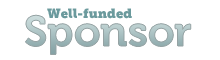
<style>
.page{position:relative;width:220px;height:60px;background:#ffffff}
.page>*{position:absolute;margin:0}
.t1{font:42.6px "Museo-700";color:#a8bec0}
.t2{font:13px "MuseoSlab-1000";color:#6b9a9d}
</style>
<div class="page">
<p class="t1" style="left:25px;top:15px;width:166px;height:40px">Sponsor</p>
<p class="t2" style="left:47px;top:8px;width:85px;height:11px">Well-funded</p>
</div>
